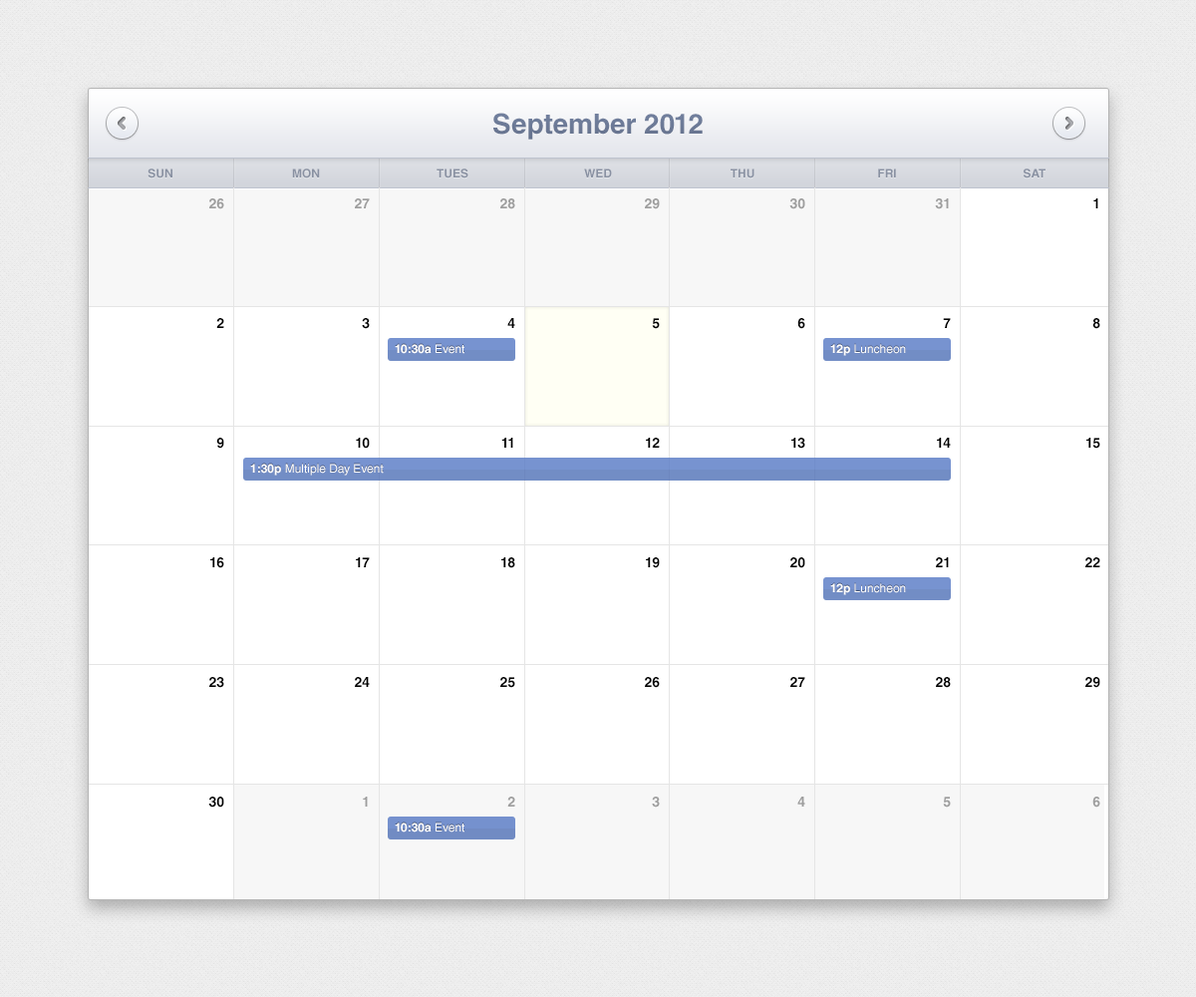
<style>
.page{position:relative;width:1196px;height:997px;background:#ffffff}
.page>*{position:absolute;margin:0}
.t1{font:27.9px "HelveticaLTStd-Bold";color:#717f9d}
.t2{font:12px "HelveticaLTStd-Bold";color:#8991a2;text-transform:uppercase}
.t3{font:14px/119.6px "HelveticaLTStd-Bold";color:#000000}
.t4{font:14px/119.6px "HelveticaLTStd-Bold";color:#9e9e9e}
.t5{font:12px "HelveticaLTStd-Bold";color:#ffffff}
.t6{font:12px "HelveticaLTStd-Roman";color:#ffffff}
</style>
<div class="page">
<p class="t1" style="left:493px;top:113px;width:210px;height:27px">September 2012</p>
<p class="t2" style="left:148px;top:168px;width:24px;height:10px">Sun</p>
<p class="t2" style="left:292px;top:168px;width:28px;height:10px">Mon</p>
<p class="t2" style="left:437px;top:168px;width:32px;height:10px">Tues</p>
<p class="t2" style="left:584px;top:168px;width:28px;height:9px">Wed</p>
<p class="t2" style="left:731px;top:168px;width:24px;height:10px">Thu</p>
<p class="t2" style="left:878px;top:168px;width:18px;height:9px">Fri</p>
<p class="t2" style="left:1024px;top:168px;width:22px;height:10px">Sat</p>
<p class="t3" style="left:208px;top:198px;width:16px;height:609px;text-align:right"><span class="t4">26<br></span>2<br>9<br>16<br>23<br>30</p>
<p class="t3" style="left:355px;top:198px;width:15px;height:608px;text-align:right"><span class="t4">27<br></span>3<br>10<br>17<br>24<br><span class="t4">1</span></p>
<p class="t3" style="left:500px;top:198px;width:15px;height:608px;text-align:right"><span class="t4">28<br></span>4<br>11<br>18<br>25<br><span class="t4">2</span></p>
<p class="t3" style="left:645px;top:198px;width:15px;height:609px;text-align:right"><span class="t4">29<br></span>5<br>12<br>19<br>26<br><span class="t4">3</span></p>
<p class="t3" style="left:789px;top:198px;width:16px;height:608px;text-align:right"><span class="t4">30<br></span>6<br>13<br>20<br>27<br><span class="t4">4</span></p>
<p class="t3" style="left:935px;top:198px;width:16px;height:609px;text-align:right"><span class="t4">31<br></span>7<br>14<br>21<br>28<br><span class="t4">5</span></p>
<p class="t3" style="left:1086px;top:198px;width:15px;height:609px;text-align:right">1<br>8<br>15<br>22<br>29<br><span class="t4">6</span></p>
<p class="t5" style="left:395px;top:344px;width:70px;height:10px">10:30a <span class="t6">Event</span></p>
<p class="t6" style="left:830px;top:344px;width:76px;height:12px"><span class="t5">12p </span>Luncheon</p>
<p class="t6" style="left:250px;top:464px;width:134px;height:11px"><span class="t5">1:30p </span>Multiple Day Event</p>
<p class="t6" style="left:830px;top:583px;width:76px;height:12px"><span class="t5">12p </span>Luncheon</p>
<p class="t5" style="left:395px;top:822px;width:70px;height:10px">10:30a <span class="t6">Event</span></p>
</div>
